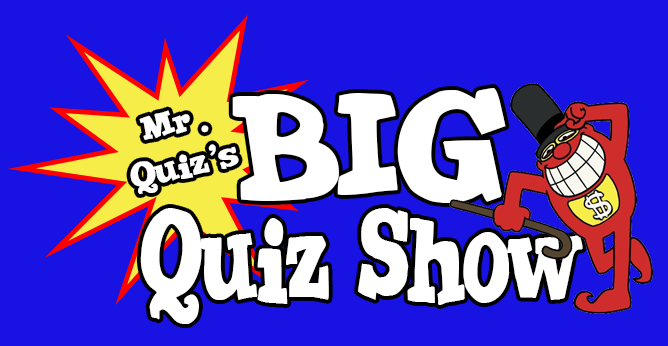
<style>
.page{position:relative;width:668px;height:346px;background:#1813e2}
.page>*{position:absolute;margin:0}
.t1{font:168.3px "JointbyPizzaDude";color:#ffffff}
.t2{font:8.7px "JointbyPizzaDude";color:#ffffff}
.t3{font:30.4px "JointbyPizzaDude";color:#ffffff;scale:0.69 1}
</style>
<div class="page">
<p class="t1" style="left:232px;top:88px;width:274px;height:115px">BIG</p>
<p class="t2" style="left:130px;top:110px;width:109px;height:84px;text-align:center;rotate:-14deg">Mr.<br>Quiz's</p>
<p class="t3" style="left:140px;top:208px;width:443px;height:116px">Quiz Show</p>
</div>
